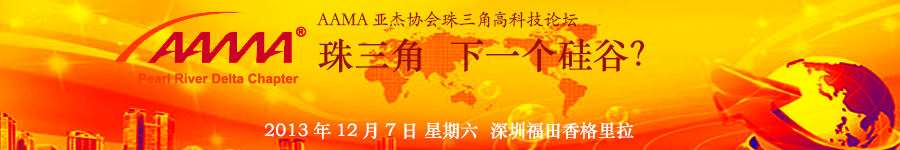
<style>
.page{position:relative;width:900px;height:150px}
.page>*{position:absolute;margin:0}
.t1{font:18px "STKaiti";color:#9b0f0f}
.t2{font:36px "STZhongsong";color:#9b0f0f}
.t3{font:18px "STZhongsong";color:#ffffff}
</style>
<div class="page">
<p class="t1" style="left:316px;top:11px;width:263px;height:18px">AAMA亚杰协会珠三角高科技论坛</p>
<p class="t2" style="left:318px;top:38px;width:326px;height:35px">珠三角  下一个硅谷？</p>
<p class="t3" style="left:264px;top:122px;width:370px;height:18px">2013年12月7日 星期六  深圳福田香格里拉</p>
</div>
